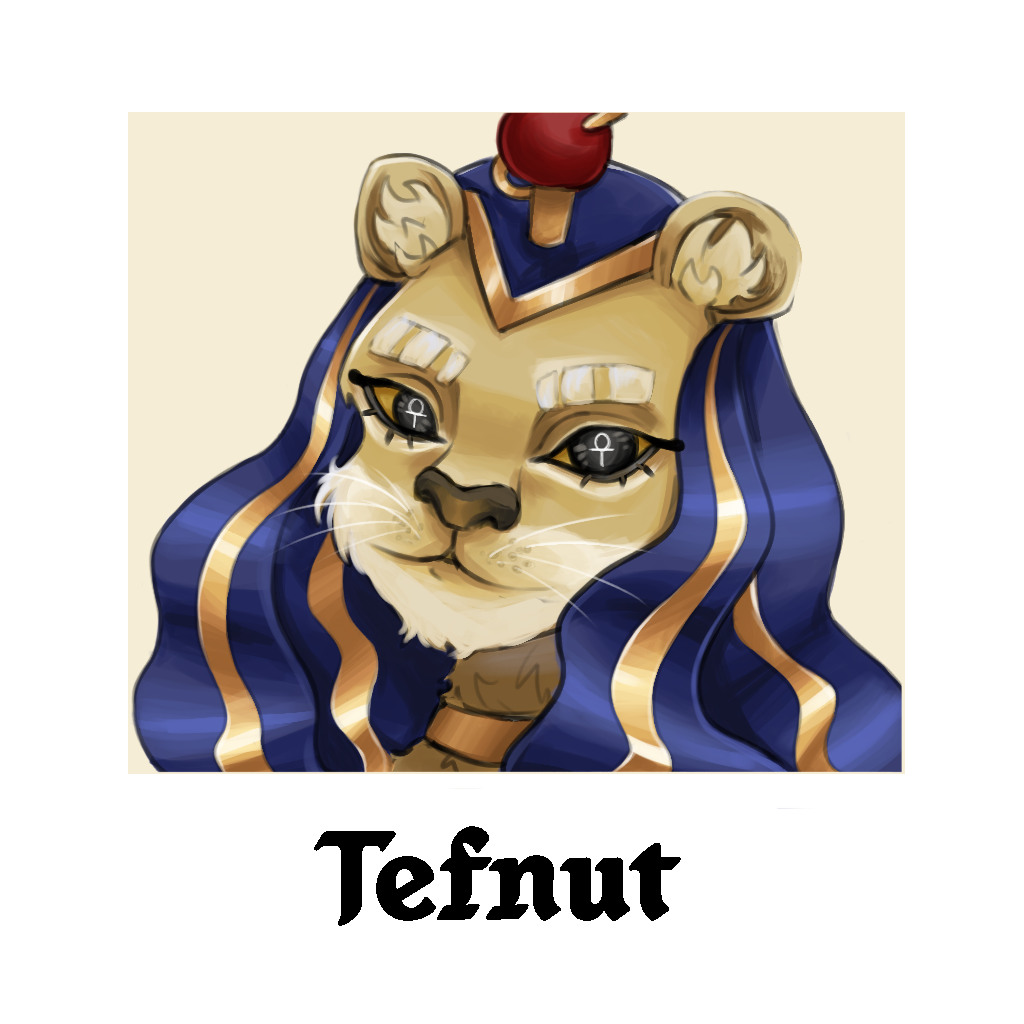
<style>
.page{position:relative;width:1024px;height:1024px;background:#ffffff}
.page>*{position:absolute;margin:0}
.t1{font:125.6px "AnubisMythicalSerif";color:#000000}
</style>
<div class="page">
<p class="t1" style="left:314px;top:826px;width:367px;height:100px">Tefnut</p>
</div>
